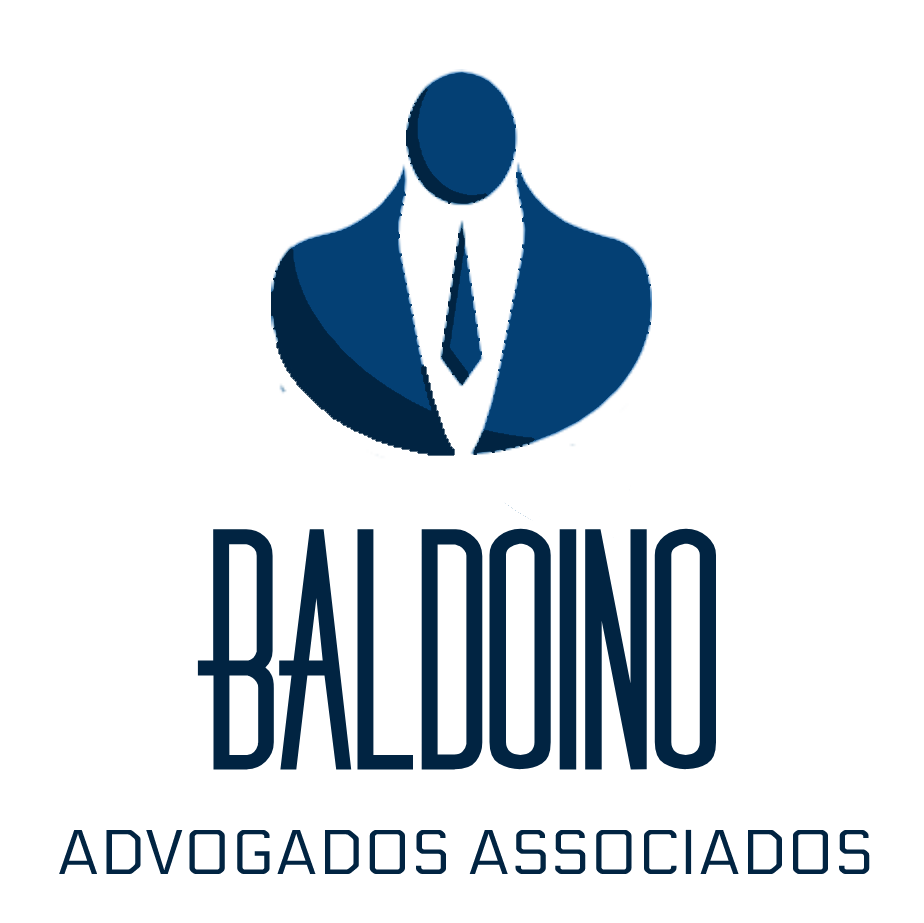
<style>
.page{position:relative;width:924px;height:923px;background:#ffffff}
.page>*{position:absolute;margin:0}
.t1{font:300px "Diner-Fatt";color:#012442}
.t2{font:63px "Electrolize-Regular";color:#012442}
</style>
<div class="page">
<p class="t1" style="left:197px;top:528px;width:519px;height:242px">BALDOINO</p>
<p class="t2" style="left:59px;top:829px;width:811px;height:45px">ADVOGADOS ASSOCIADOS</p>
</div>
